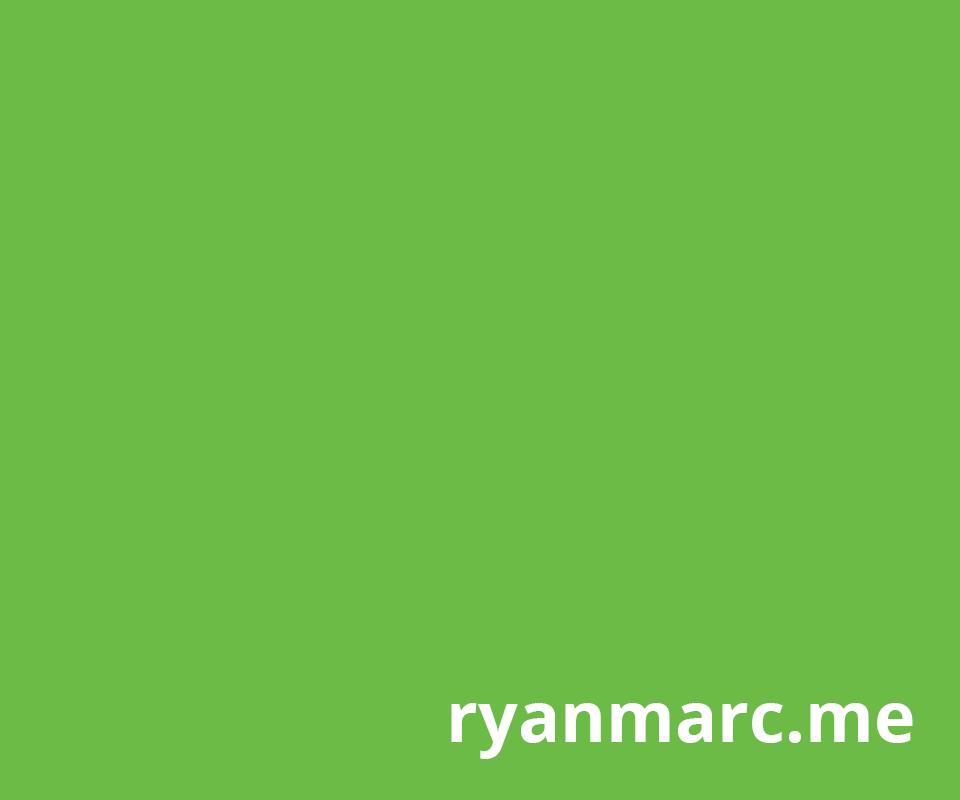
<style>
.page{position:relative;width:960px;height:800px;background:#6cbb47}
.page>*{position:absolute;margin:0}
.t1{font:70px "OpenSans-Bold";color:#ffffff}
</style>
<div class="page">
<p class="t1" style="left:451px;top:703px;width:462px;height:56px">ryanmarc.me</p>
</div>
